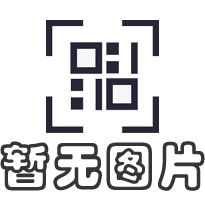
<style>
.page{position:relative;width:205px;height:205px;background:#ffffff}
.page>*{position:absolute;margin:0}
.t1{font:50px "STCaiyun";letter-spacing:0.014em;color:#363535;font-weight:bold}
</style>
<div class="page">
<p class="t1" style="left:0px;top:141px;width:205px;height:50px">暂无图片</p>
</div>
